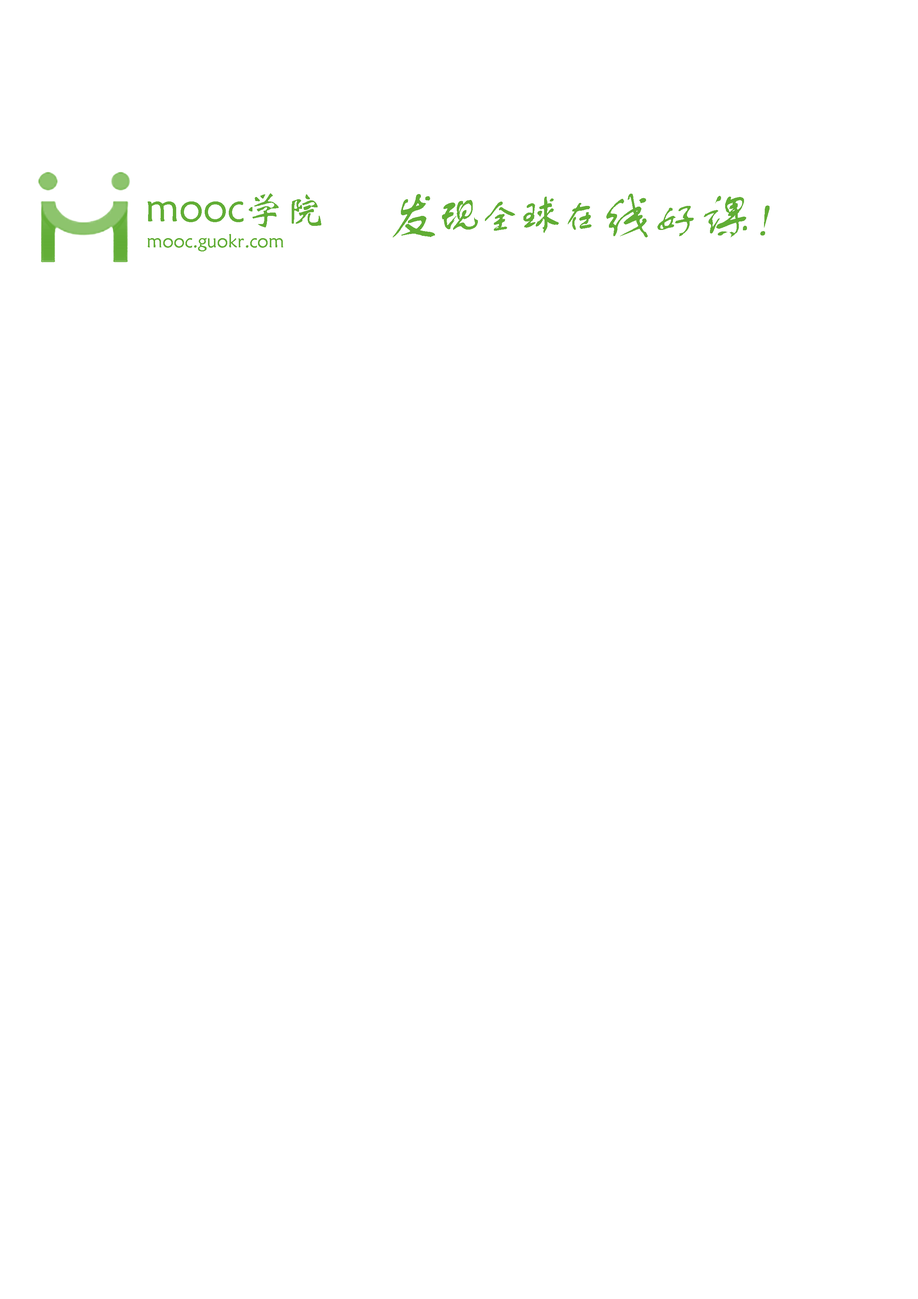
<style>
.page{position:relative;width:918px;height:1299px;background:#ffffff}
.page>*{position:absolute;margin:0}
.t1{font:40.1px "STXinwei";color:#61ad35}
.t2{font:55.5px "FZSTK--GBK1-0";color:#61ad35}
.t3{font:43.2px "FZSTK--GBK1-0";color:#61ad35}
.t4{font:37px "FZSTK--GBK1-0";color:#61ad35}
.t5{font:37px "FZSTK--GBK1-0";color:#61ad35;font-style:italic}
.t6{font:18.5px "STXinwei";color:#61ad35}
</style>
<div class="page">
<p class="t1" style="left:148px;top:193px;width:173px;height:34px">mooc学院</p>
<p class="t2" style="left:393px;top:194px;width:42px;height:43px">发</p>
<p class="t3" style="left:523px;top:197px;width:69px;height:36px">球<span class="t4">在</span></p>
<p class="t2" style="left:606px;top:194px;width:164px;height:43px">线<span class="t3">好</span>课<span class="t5">！</span></p>
<p class="t3" style="left:442px;top:200px;width:73px;height:31px">现<span class="t4">全</span></p>
<p class="t6" style="left:148px;top:234px;width:135px;height:17px">mooc.guokr.com</p>
</div>
